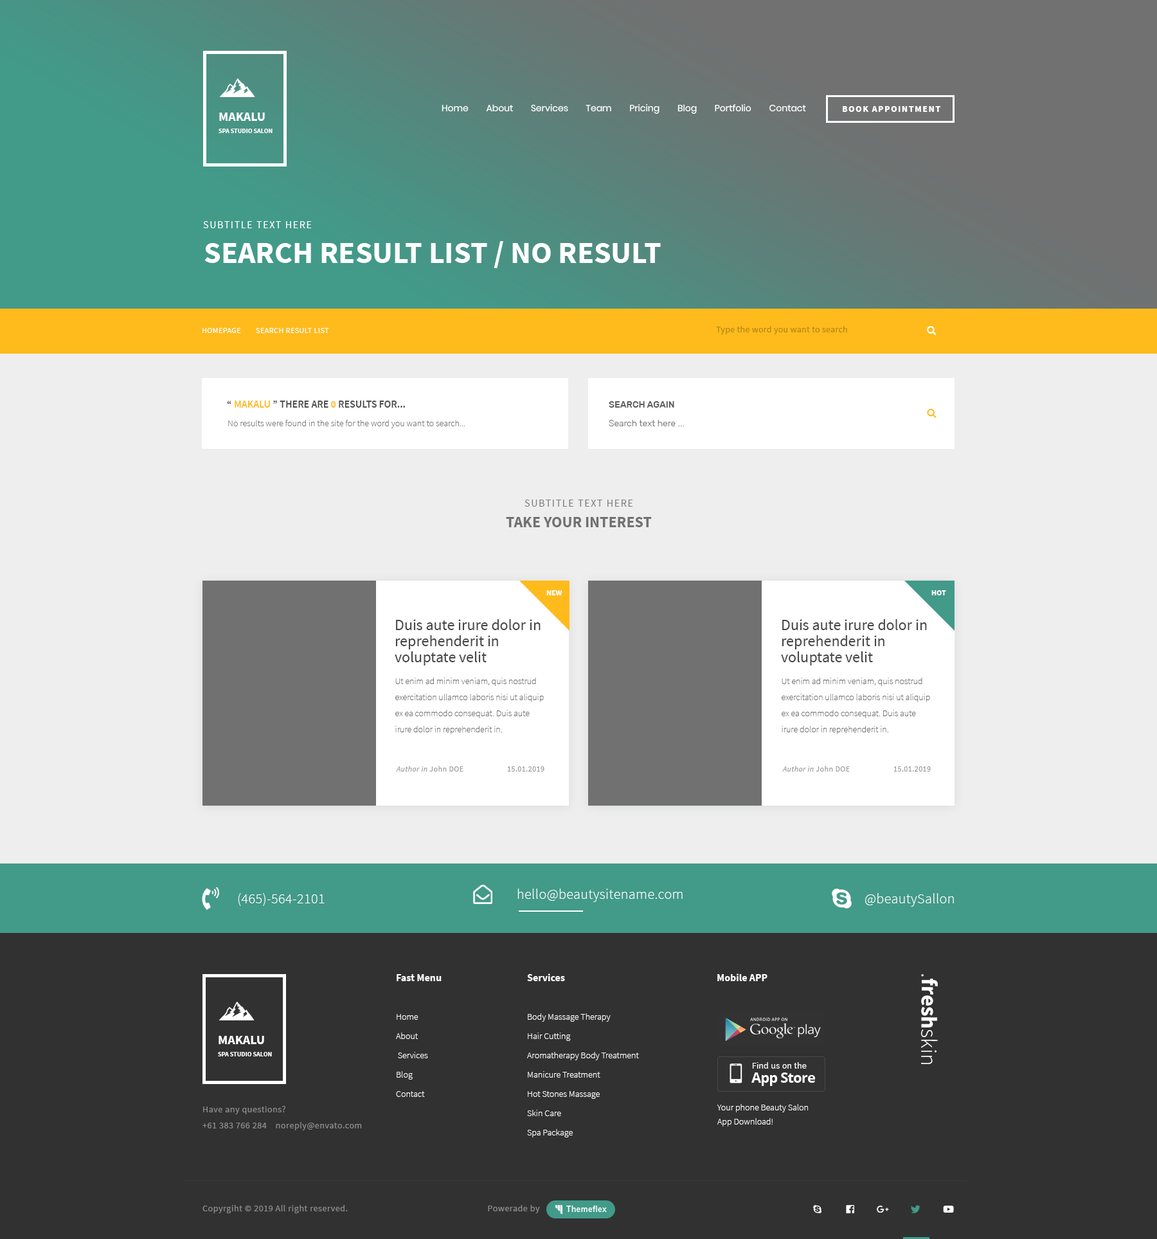
<style>
.page{position:relative;width:1157px;height:1239px;background:#eeeeee}
.page>*{position:absolute;margin:0}
.t1{font:12.9px "SourceSansPro-Bold";color:#ffffff;text-transform:uppercase}
.t2{font:9px "Poppins-Regular";color:#ffffff}
.t3{font:9px "SourceSansPro-Black";letter-spacing:0.1em;color:#ffffff}
.t4{font:6.4px "SourceSansPro-Bold";color:#ffffff;text-transform:uppercase}
.t5{font:10.3px "SourceSansPro-Regular";letter-spacing:0.1em;color:#ffffff}
.t6{font:30.9px "SourceSansPro-Bold";color:#ffffff}
.t7{font:7.7px "SourceSansPro-Regular";letter-spacing:0.04em;color:#ffffff}
.t8{font:9px "SourceSansPro-Regular";letter-spacing:0.02em;color:#b68616}
.t9{font:10.3px "SourceSansPro-SemiBold";color:#4f4f4f;text-transform:uppercase}
.t10{font:10.3px "SourceSansPro-SemiBold";color:#ffbb1c;text-transform:uppercase}
.t11{font:10.3px "SourceSansPro-SemiBold";color:#ffbb1c}
.t12{font:9px "Rubik-Medium";color:#5d5d5d;text-transform:uppercase}
.t13{font:9px "SourceSansPro-Light";color:#747474}
.t14{font:9px "Rubik-Light";color:#747474}
.t15{font:10.3px "SourceSansPro-Regular";letter-spacing:0.1em;color:#7b7b7b}
.t16{font:15.4px "SourceSansPro-Bold";color:#717171}
.t17{font:7.7px "SourceSansPro-Bold";color:#ffffff}
.t18{font:15.4px/16.1px "SourceSansPro-Regular";color:#464646}
.t19{font:9px/16.1px "SourceSansPro-ExtraLight";color:#6f6f6f}
.t20{font:7.7px "SourceSansPro-Italic";letter-spacing:0.04em;color:#9a9a9a}
.t21{font:7.7px "SourceSansPro-Regular";letter-spacing:0.04em;color:#9a9a9a}
.t22{font:14.1px "SourceSansPro-Light";letter-spacing:0.02em;color:#ffffff}
.t23{font:9px/19.3px "SourceSansPro-Light";color:#ffffff}
.t24{font:10.3px/19.3px "SourceSansPro-Bold";color:#ffffff}
.t25{font:10.3px "SourceSansPro-Bold";color:#ffffff}
.t26{font:22.5px "SourceSansPro-Bold";color:#ffffff}
.t27{font:22.5px "SourceSansPro-Light";color:#ffffff}
.t28{font:9px/16.1px "SourceSansPro-Regular";letter-spacing:0.04em;color:#8c8c8c}
.t29{font:9px/14.1px "SourceSansPro-Light";color:#ffffff}
.t30{font:9px "SourceSansPro-Regular";letter-spacing:0.04em;color:#8c8c8c}
</style>
<div class="page">
<p class="t1" style="left:219px;top:113px;width:46px;height:8px">MAKALU</p>
<p class="t2" style="left:442px;top:104px;width:364px;height:10px">Home        About        Services        Team        Pricing        Blog        Portfolio        Contact</p>
<p class="t3" style="left:843px;top:106px;width:98px;height:6px">BOOK APPOINTMENT</p>
<p class="t4" style="left:219px;top:129px;width:54px;height:4px">spa studıo salon</p>
<p class="t5" style="left:203px;top:221px;width:109px;height:7px">SUBTITLE TEXT HERE</p>
<p class="t6" style="left:204px;top:241px;width:457px;height:27px">SEARCH RESULT LIST / NO RESULT</p>
<p class="t7" style="left:203px;top:328px;width:126px;height:5px">HOMEPAGE        SEARCH RESULT LIST</p>
<p class="t8" style="left:716px;top:326px;width:131px;height:8px">Type the word you want to search</p>
<p class="t9" style="left:227px;top:401px;width:178px;height:7px">“<span class="t10"> Makalu</span> ” there are <span class="t11">0</span> results for...</p>
<p class="t12" style="left:609px;top:401px;width:65px;height:7px">Search again</p>
<p class="t13" style="left:228px;top:420px;width:237px;height:8px">No results were found in the site for the word you want to search...</p>
<p class="t14" style="left:609px;top:420px;width:75px;height:6px">Search text here ...</p>
<p class="t15" style="left:525px;top:500px;width:108px;height:7px">SUBTITLE TEXT HERE</p>
<p class="t16" style="left:506px;top:517px;width:146px;height:10px">TAKE YOUR INTEREST</p>
<p class="t17" style="left:546px;top:590px;width:16px;height:5px">NEW</p>
<p class="t17" style="left:932px;top:590px;width:14px;height:5px">HOT</p>
<p class="t18" style="left:395px;top:619px;width:146px;height:46px">Duis aute irure dolor in reprehenderit in<br>voluptate velit</p>
<p class="t18" style="left:781px;top:619px;width:146px;height:46px">Duis aute irure dolor in reprehenderit in<br>voluptate velit</p>
<p class="t19" style="left:395px;top:678px;width:149px;height:56px">Ut enim ad minim veniam, quis nostrud exercitation ullamco laboris nisi ut aliquip ex ea commodo consequat. Duis aute irure dolor in reprehenderit in.</p>
<p class="t19" style="left:782px;top:678px;width:148px;height:56px">Ut enim ad minim veniam, quis nostrud exercitation ullamco laboris nisi ut aliquip ex ea commodo consequat. Duis aute irure dolor in reprehenderit in.</p>
<p class="t20" style="left:396px;top:766px;width:68px;height:5px">Author in <span class="t21">John DOE</span></p>
<p class="t21" style="left:507px;top:766px;width:37px;height:5px">15.01.2019</p>
<p class="t20" style="left:782px;top:766px;width:68px;height:5px">Author in <span class="t21">John DOE</span></p>
<p class="t21" style="left:894px;top:766px;width:37px;height:5px">15.01.2019</p>
<p class="t22" style="left:238px;top:893px;width:87px;height:13px">(465)-564-2101</p>
<p class="t22" style="left:518px;top:888px;width:165px;height:14px">hello@beautysitename.com</p>
<p class="t22" style="left:865px;top:893px;width:89px;height:13px">@beautySallon</p>
<p class="t23" style="left:396px;top:974px;width:46px;height:123px"><span class="t24">Fast Menu<br><br></span>Home<br>About<br> Services<br>Blog<br>Contact</p>
<p class="t23" style="left:527px;top:973px;width:112px;height:164px"><span class="t24">Services<br><br></span>Body Massage Therapy<br>Hair Cutting<br>Aromatherapy Body Treatment<br>Manicure Treatment<br>Hot Stones Massage<br>Skin Care<br>Spa Package</p>
<p class="t25" style="left:717px;top:973px;width:51px;height:8px">Mobile APP</p>
<p class="t26" style="left:921px;top:974px;width:17px;height:90px;rotate:90deg"><span class="t27">.</span>fresh<span class="t27">skin</span></p>
<p class="t1" style="left:219px;top:1036px;width:45px;height:8px">MAKALU</p>
<p class="t4" style="left:218px;top:1052px;width:54px;height:4px">spa studıo salon</p>
<p class="t28" style="left:203px;top:1106px;width:159px;height:24px">Have any questions? <br>+61 383 766 284    noreply@envato.com</p>
<p class="t29" style="left:717px;top:1104px;width:91px;height:22px">Your phone Beauty Salon<br>App Download!</p>
<p class="t30" style="left:203px;top:1205px;width:145px;height:8px">Copyrgiht © 2019 All right reserved.</p>
<p class="t30" style="left:488px;top:1205px;width:52px;height:8px">Powerade by</p>
</div>
